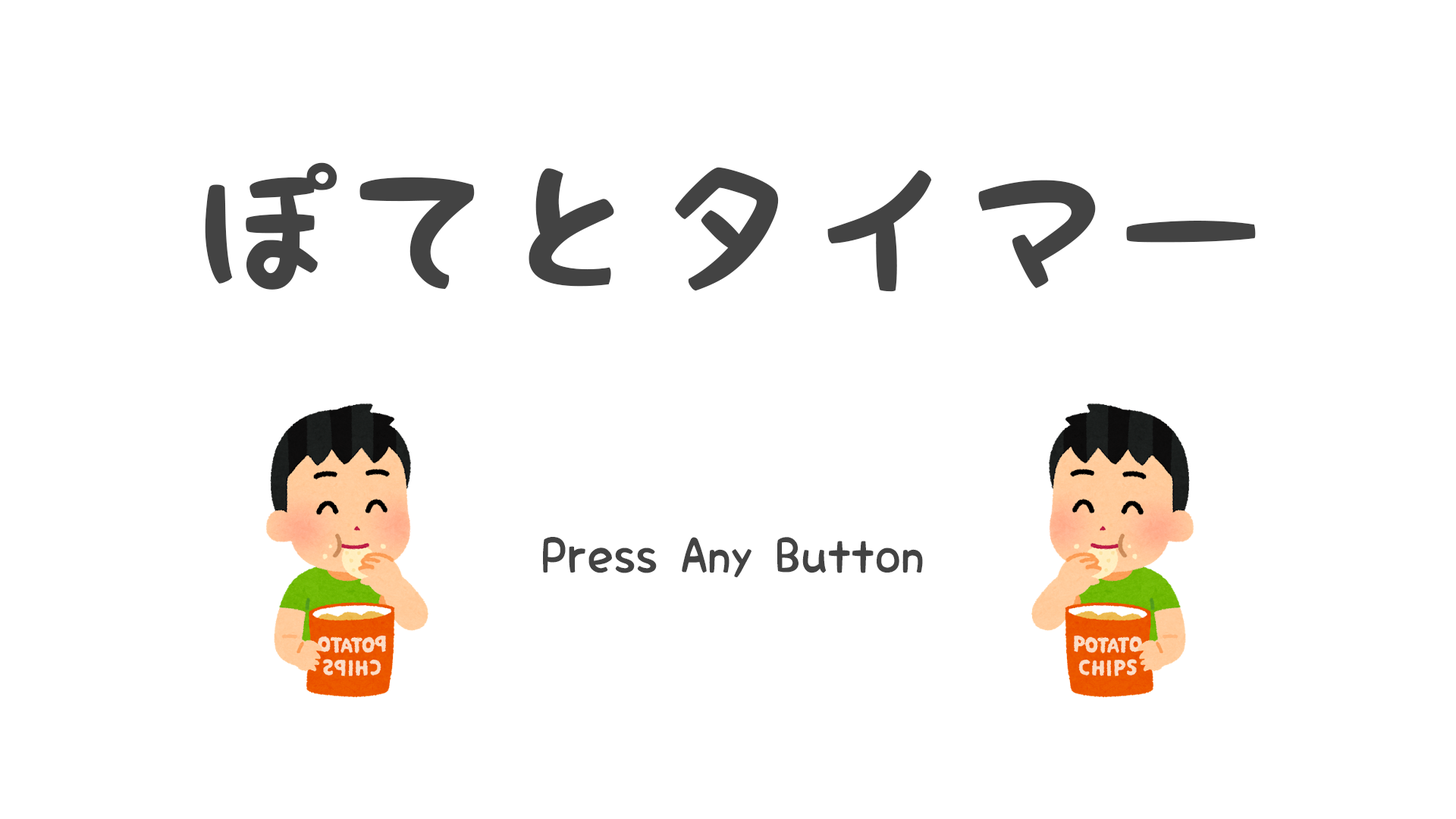
<style>
.page{position:relative;width:1456px;height:819px;background:#ffffff}
.page>*{position:absolute;margin:0}
.t1{font:154.7px "KFhimaji";color:#434343}
.t2{font:45.5px "KFhimaji";color:#434343}
</style>
<div class="page">
<p class="t1" style="left:205px;top:162px;width:1051px;height:130px">ぽてとタイマー</p>
<p class="t2" style="left:543px;top:537px;width:380px;height:41px">Press Any Button</p>
</div>
